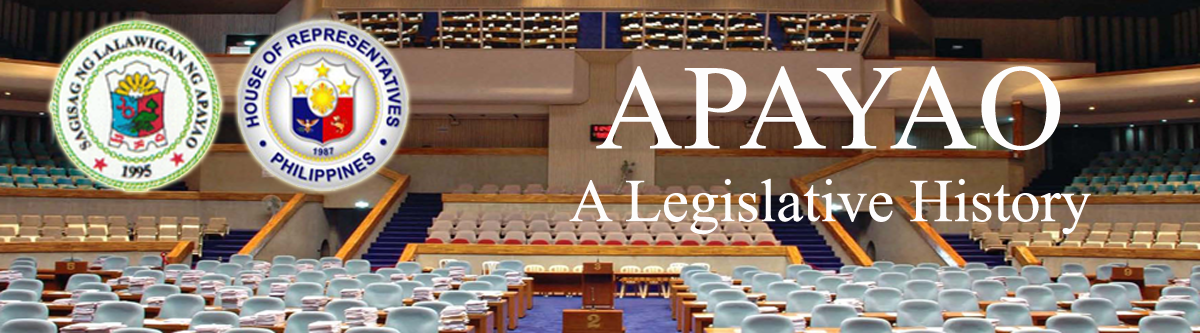
<style>
.page{position:relative;width:1200px;height:333px}
.page>*{position:absolute;margin:0}
.t1{font:60.5px "TimesNewRomanPSMT";color:#fdfcfc}
.t2{font:121.1px "TimesNewRomanPSMT";color:#fdfdfd}
</style>
<div class="page">
<p class="t1" style="left:569px;top:66px;width:522px;height:169px;text-align:center"><span class="t2">APAYAO<br></span>A Legislative History</p>
</div>
